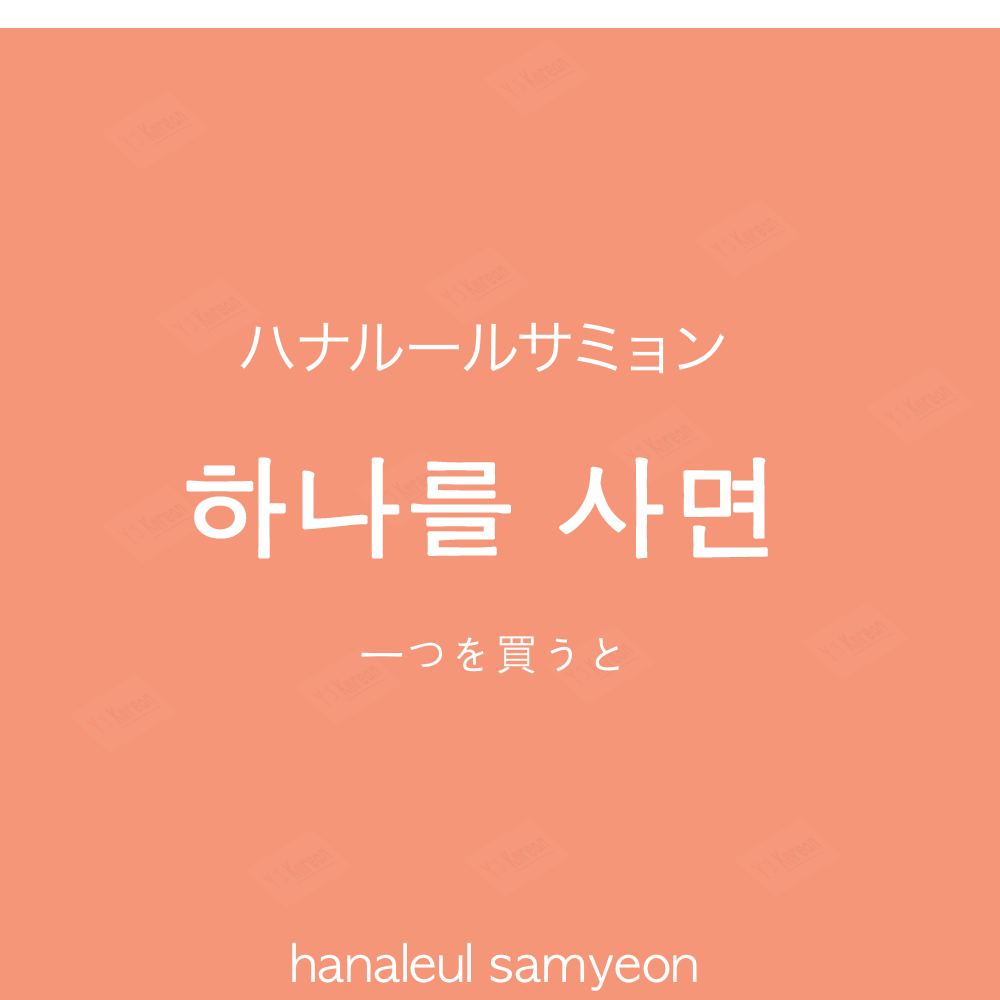
<style>
.page{position:relative;width:1000px;height:1000px;background:#f69679}
.page>*{position:absolute;margin:0}
.t1{font:60px "HiraKakuProN-W3";color:#ffffff}
.t2{font:110px "AppleGothic";color:#ffffff;font-weight:bold}
.t3{font:45px "AppleGothic";color:#ffffff}
.t4{font:50px "AppleGothic";color:#ffffff}
</style>
<div class="page">
<p class="t1" style="left:240px;top:322px;width:484px;height:52px">ハナルールサミョン</p>
<p class="t2" style="left:186px;top:457px;width:582px;height:102px">하나를 사면</p>
<p class="t3" style="left:361px;top:636px;width:258px;height:38px">一つを買うと</p>
<p class="t4" style="left:292px;top:942px;width:405px;height:49px">hanaleul samyeon</p>
</div>
